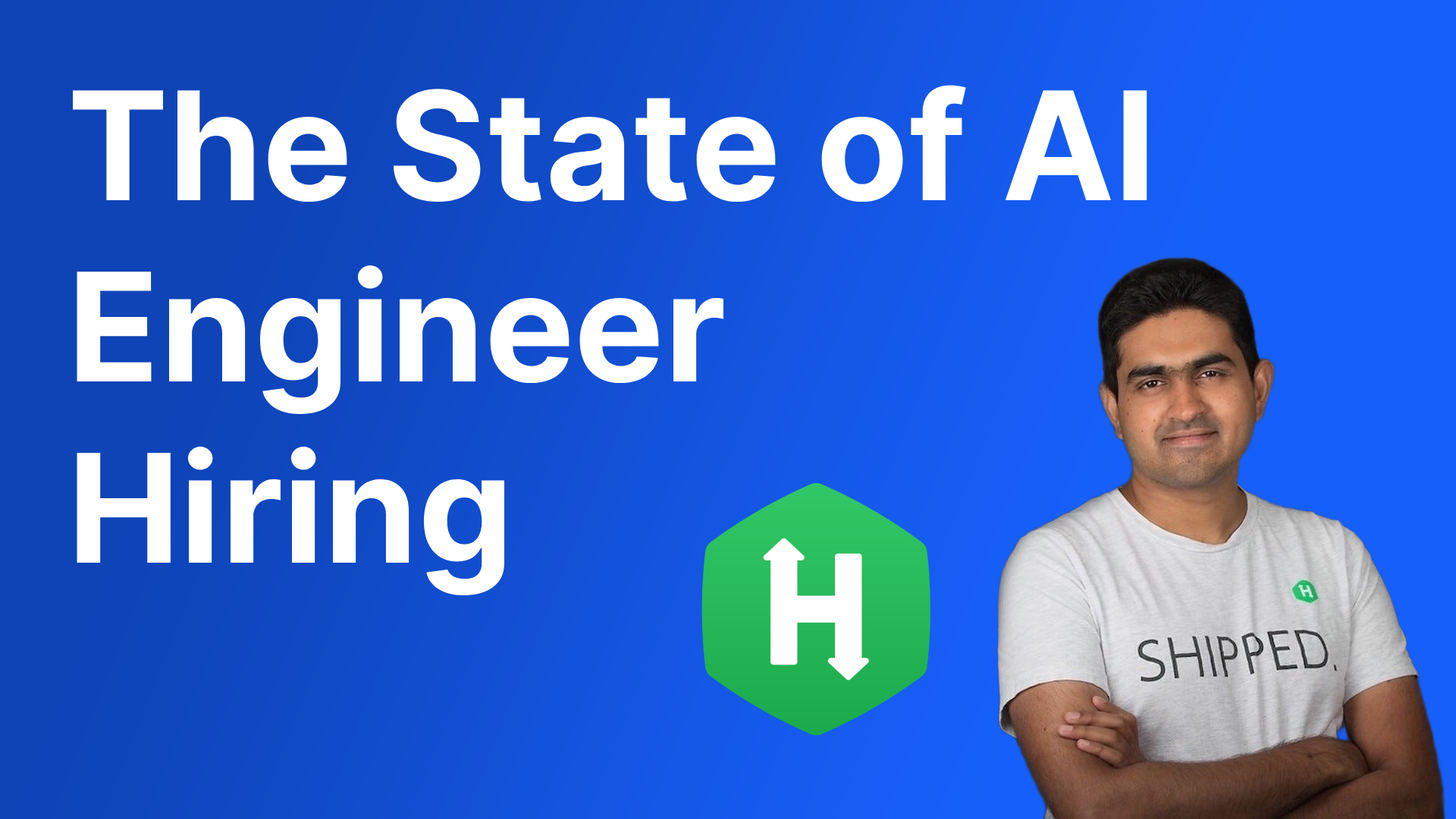
<style>
.page{position:relative;width:1456px;height:819px}
.page>*{position:absolute;margin:0}
.t1{font:150.9px "Inter-Bold";color:#ffffff}
</style>
<div class="page">
<p class="t1" style="left:73px;top:85px;width:1074px;height:510px">The State of AI <br>Engineer <br>Hiring</p>
</div>
